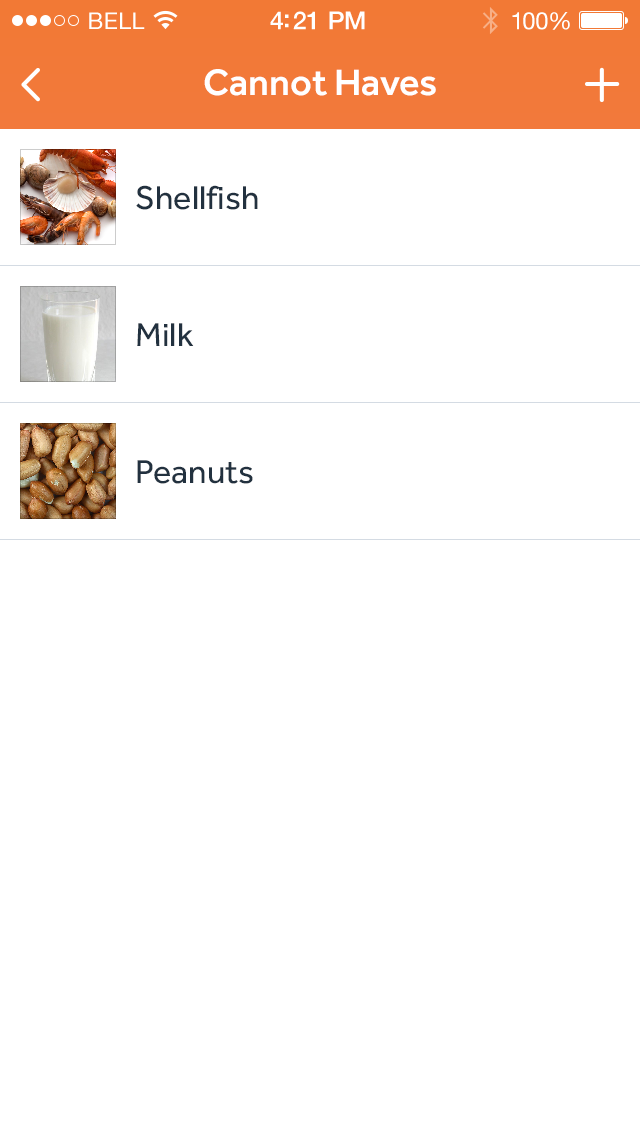
<style>
.page{position:relative;width:640px;height:1136px;background:#ffffff}
.page>*{position:absolute;margin:0}
.t1{font:23px "HelveticaNeue";letter-spacing:0.02em;color:#ffffff}
.t2{font:25px "HelveticaNeue-Medium";letter-spacing:-0.02em;color:#ffffff}
.t3{font:24px "HelveticaNeue";letter-spacing:-0.02em;color:#ffffff}
.t4{font:38px "Effra-Medium";color:#ffffff}
.t5{font:34px "Effra-Regular";color:#22313f}
</style>
<div class="page">
<p class="t1" style="left:89px;top:12px;width:56px;height:17px">BELL</p>
<p class="t2" style="left:270px;top:11px;width:95px;height:19px">4:21 PM</p>
<p class="t3" style="left:512px;top:12px;width:58px;height:18px">100%</p>
<p class="t4" style="left:204px;top:69px;width:232px;height:27px">Cannot Haves</p>
<p class="t5" style="left:136px;top:185px;width:122px;height:25px">Shellfish</p>
<p class="t5" style="left:137px;top:323px;width:57px;height:23px">Milk</p>
<p class="t5" style="left:137px;top:460px;width:116px;height:24px">Peanuts</p>
</div>
